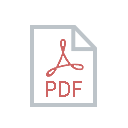
<style>
.page{position:relative;width:128px;height:128px;background:#ffffff}
.page>*{position:absolute;margin:0}
.t1{font:21px "TaipeiSansTCBeta-Regular";color:#ce6564}
</style>
<div class="page">
<p class="t1" style="left:46px;top:81px;width:36px;height:16px">PDF</p>
</div>
